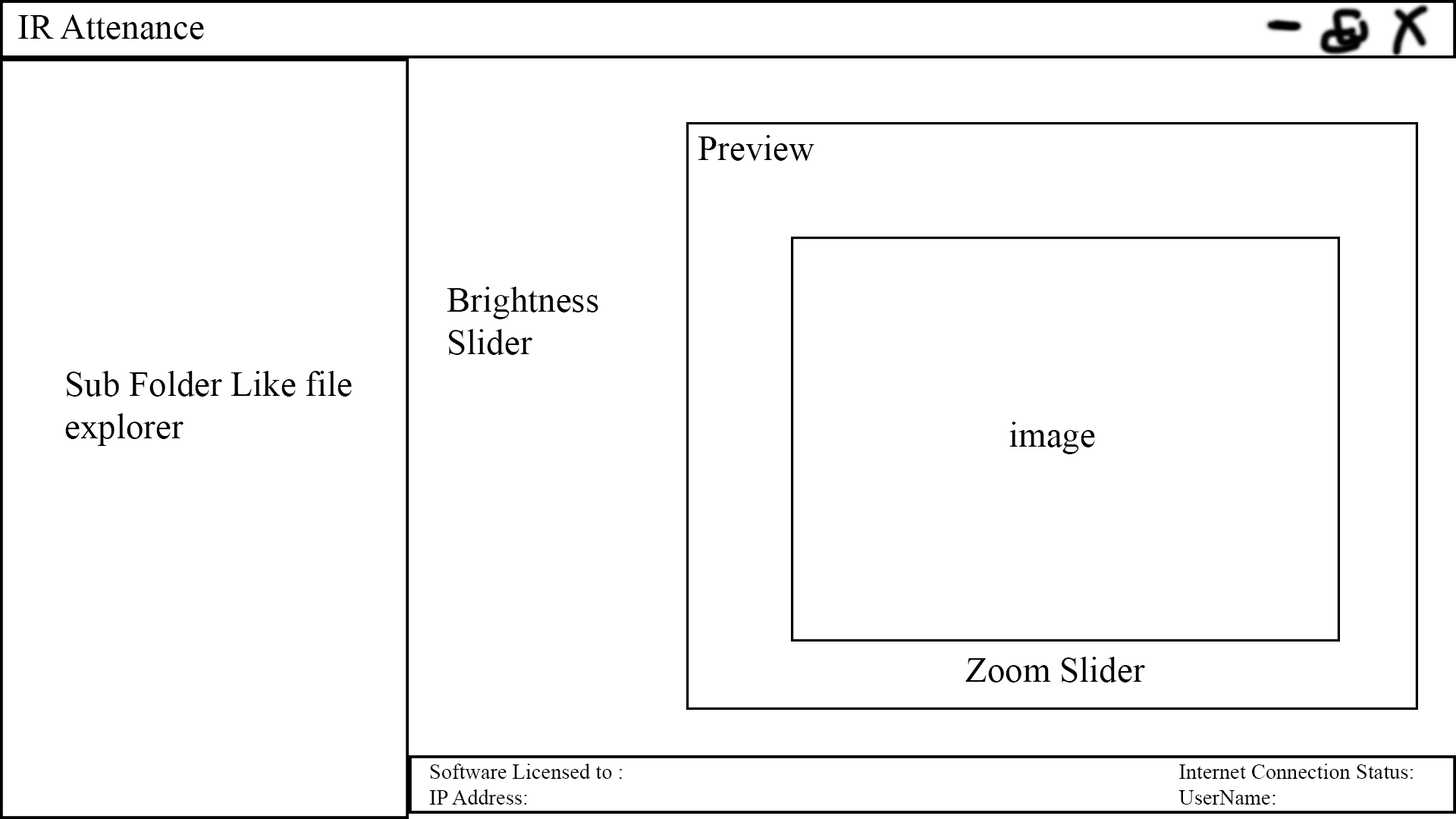
<style>
.page{position:relative;width:1456px;height:819px;background:#ffffff}
.page>*{position:absolute;margin:0}
.t1{font:35.6px "TimesNewRomanPSMT";color:#000000}
.t2{font:21.6px "TimesNewRomanPSMT";color:#000000}
</style>
<div class="page">
<p class="t1" style="left:18px;top:14px;width:186px;height:25px">IR Attenance</p>
<p class="t1" style="left:698px;top:135px;width:116px;height:26px">Preview</p>
<p class="t1" style="left:447px;top:287px;width:151px;height:68px">Brightness <br>Slider</p>
<p class="t1" style="left:65px;top:371px;width:287px;height:75px">Sub Folder Like file explorer</p>
<p class="t1" style="left:1009px;top:422px;width:86px;height:32px">image</p>
<p class="t1" style="left:965px;top:657px;width:180px;height:25px">Zoom Slider</p>
<p class="t2" style="left:429px;top:764px;width:984px;height:41px">Software Licensed to :                      Internet Connection Status:<br>IP Address:                         UserName:</p>
</div>
